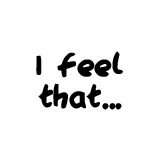
<style>
.page{position:relative;width:160px;height:160px;background:#ffffff}
.page>*{position:absolute;margin:0}
.t1{font:35.9px/31.9px "QAReports";color:#000000}
</style>
<div class="page">
<p class="t1" style="left:36px;top:51px;width:87px;height:59px;text-align:center">I feel<br>that...</p>
</div>
